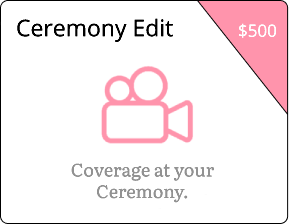
<style>
.page{position:relative;width:289px;height:224px;background:#ffffff}
.page>*{position:absolute;margin:0}
.t1{font:23px "OpenSans-Regular";color:#000000}
.t2{font:17px "OpenSans-Regular";color:#ffffff}
.t3{font:18px "Literata-Regular";color:#929292}
</style>
<div class="page">
<p class="t1" style="left:17px;top:18px;width:156px;height:24px">Ceremony Edit</p>
<p class="t2" style="left:239px;top:23px;width:38px;height:15px">$500</p>
<p class="t3" style="left:71px;top:163px;width:144px;height:40px;text-align:center">Coverage at your <br>Ceremony.</p>
</div>
